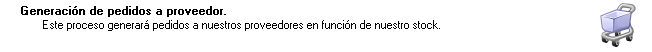
<style>
.page{position:relative;width:652px;height:52px;background:#ffffff}
.page>*{position:absolute;margin:0}
.t1{font:11.4px "MS Sans Serif";color:#000000;font-weight:bold}
.t2{font:11.4px "MS Sans Serif";color:#000000}
</style>
<div class="page">
<p class="t1" style="left:21px;top:6px;width:205px;height:11px">Generación de pedidos a proveedor.</p>
<p class="t2" style="left:43px;top:20px;width:397px;height:11px">Este proceso generará pedidos a nuestros proveedores en función de nuestro stock.</p>
</div>
